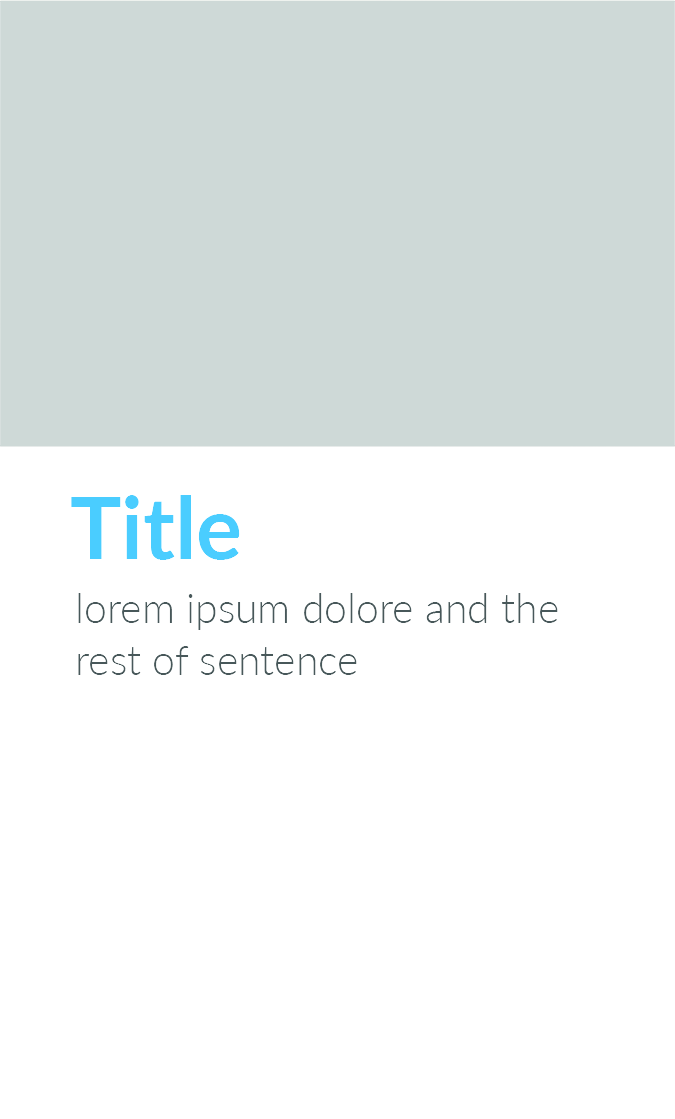
<style>
.page{position:relative;width:675px;height:1119px;background:#ffffff}
.page>*{position:absolute;margin:0}
.t1{font:86px "Lato-Bold";color:#4acdff}
.t2{font:41px/52px "Lato-Light";color:#48585a}
</style>
<div class="page">
<p class="t1" style="left:71px;top:495px;width:169px;height:65px">Title</p>
<p class="t2" style="left:78px;top:593px;width:480px;height:82px;text-align:right">lorem ipsum dolore and the rest of sentence</p>
</div>
